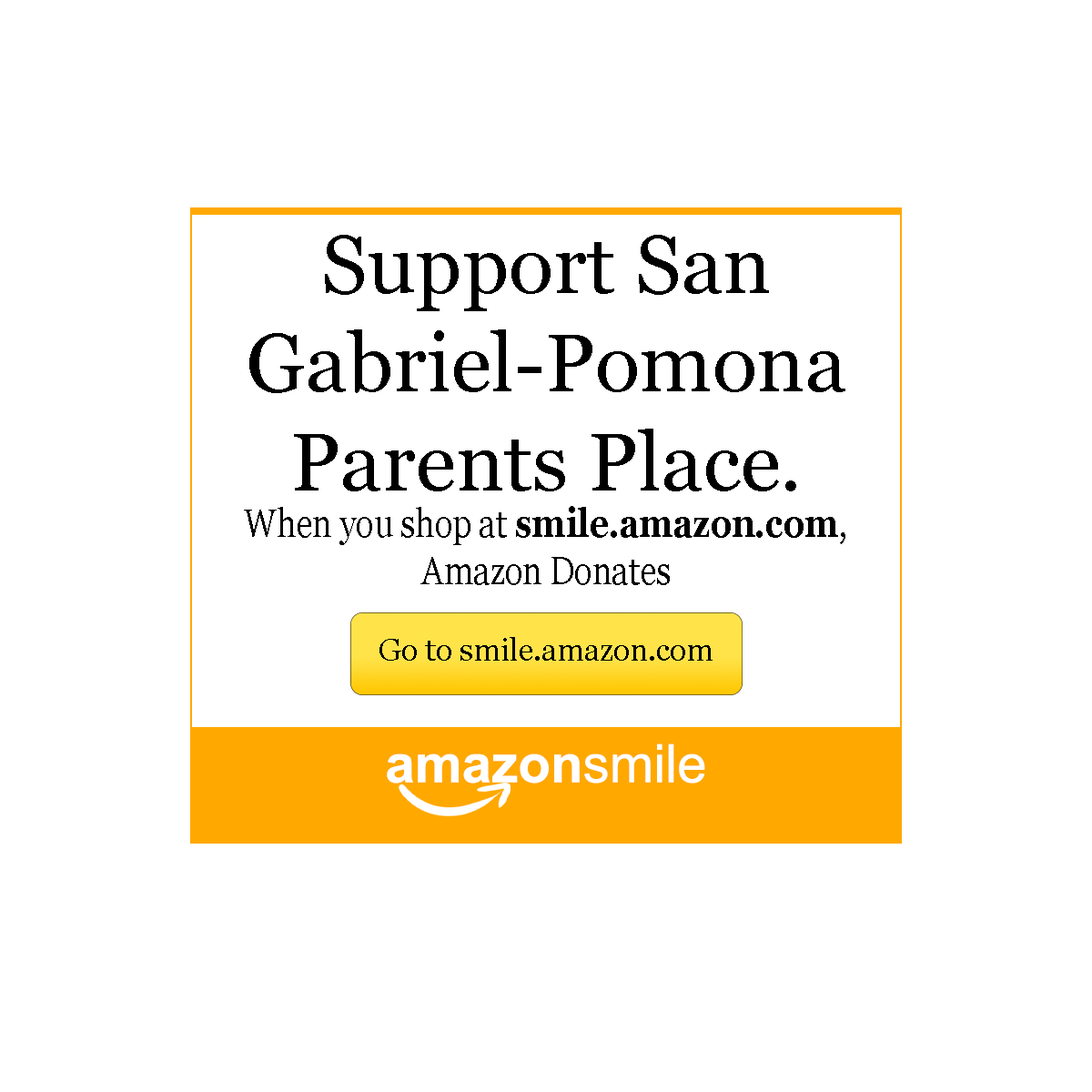
<style>
.page{position:relative;width:1092px;height:1092px;background:#ffffff}
.page>*{position:absolute;margin:0}
.t1{font:82.3px "Georgia";color:#000000}
.t2{font:39.5px "Georgia";color:#000000;scale:0.84 1}
.t3{font:39.5px "Georgia-Bold";color:#000000;scale:0.84 1}
.t4{font:30.7px "Georgia";color:#000000}
.t5{font:53.1px "Arial-BoldMT";color:#ffffff}
.t6{font:53.1px "ArialMT";color:#ffffff}
</style>
<div class="page">
<p class="t1" style="left:249px;top:235px;width:596px;height:256px;text-align:center">Support San Gabriel-Pomona Parents Place.</p>
<p class="t2" style="left:244px;top:506px;width:601px;height:79px;text-align:center">When you shop at <span class="t3">smile.amazon.com</span>,<br>Amazon Donates</p>
<p class="t4" style="left:379px;top:637px;width:334px;height:24px">Go to smile.amazon.com</p>
<p class="t5" style="left:387px;top:743px;width:318px;height:40px">amazon<span class="t6">smile</span></p>
</div>
